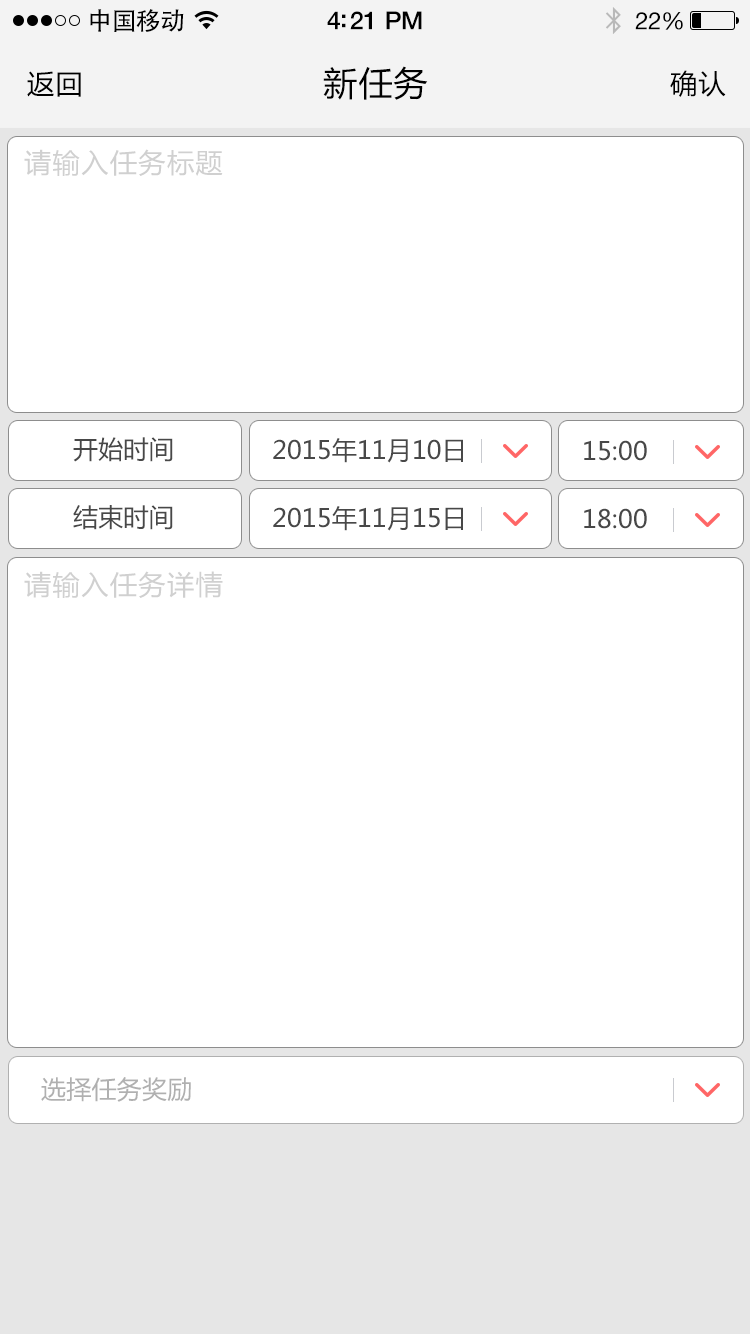
<style>
.page{position:relative;width:750px;height:1334px;background:#ffffff}
.page>*{position:absolute;margin:0}
.t1{font:25px "AdobeHeitiStd-Regular";letter-spacing:-0.025em;color:#000000}
.t2{font:25px "HelveticaNeue-Medium";letter-spacing:-0.02em;color:#000000}
.t3{font:24px "HelveticaNeue";letter-spacing:-0.02em;color:#000000}
.t4{font:27px "MicrosoftYaHei";letter-spacing:0.05em;color:#000000}
.t5{font:34px "MicrosoftYaHei";letter-spacing:0.03em;color:#000000}
.t6{font:27px "MicrosoftYaHei";letter-spacing:0.05em;color:#d0d0d0}
.t7{font:25px "MicrosoftYaHei";letter-spacing:0.01em;color:#555555}
.t8{font:25px "MicrosoftYaHei";letter-spacing:0.01em;color:#b0b0b0}
</style>
<div class="page">
<p class="t1" style="left:90px;top:9px;width:94px;height:23px">中国移动</p>
<p class="t2" style="left:327px;top:11px;width:95px;height:19px">4:21 PM</p>
<p class="t3" style="left:635px;top:12px;width:48px;height:18px">22%</p>
<p class="t4" style="left:27px;top:71px;width:54px;height:26px">返回</p>
<p class="t5" style="left:323px;top:66px;width:105px;height:34px">新任务</p>
<p class="t4" style="left:670px;top:70px;width:56px;height:27px">确认</p>
<p class="t6" style="left:24px;top:149px;width:199px;height:27px">请输入任务标题</p>
<p class="t7" style="left:73px;top:437px;width:100px;height:25px">开始时间</p>
<p class="t7" style="left:273px;top:438px;width:190px;height:25px">2015年11月10日</p>
<p class="t7" style="left:584px;top:440px;width:63px;height:21px">15:00</p>
<p class="t7" style="left:73px;top:505px;width:100px;height:25px">结束时间</p>
<p class="t7" style="left:273px;top:506px;width:190px;height:25px">2015年11月15日</p>
<p class="t7" style="left:584px;top:508px;width:63px;height:21px">18:00</p>
<p class="t6" style="left:24px;top:571px;width:199px;height:27px">请输入任务详情</p>
<p class="t8" style="left:41px;top:1077px;width:150px;height:25px">选择任务奖励</p>
</div>
